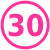
<style>
.page{position:relative;width:50px;height:50px;background:#ffffff}
.page>*{position:absolute;margin:0}
.t1{font:30px "DejaVuSansCondensed-Bold";color:#ff3399}
</style>
<div class="page">
<p class="t1" style="left:8px;top:13px;width:36px;height:24px">30</p>
</div>
